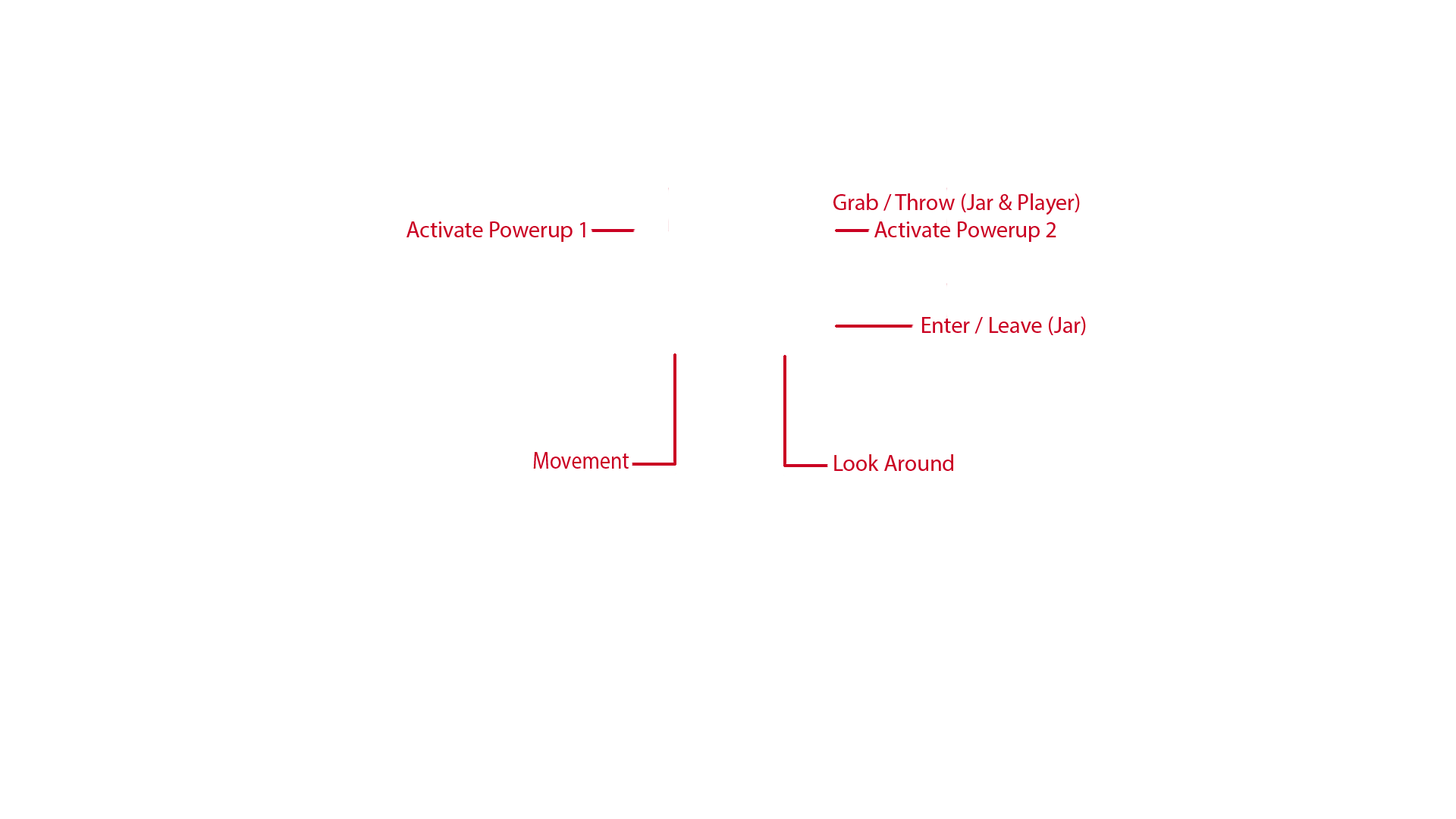
<style>
.page{position:relative;width:1456px;height:819px;background:#ffffff}
.page>*{position:absolute;margin:0}
.t1{font:22.7px "MyriadPro-Regular";color:#ca0022}
.t2{font:23.9px "MyriadPro-Regular";color:#ca0022;scale:0.89 1}
</style>
<div class="page">
<p class="t1" style="left:833px;top:193px;width:247px;height:22px">Grab / Throw (Jar &amp; Player)</p>
<p class="t1" style="left:406px;top:221px;width:179px;height:21px">Activate Powerup 1</p>
<p class="t1" style="left:874px;top:221px;width:182px;height:21px">Activate Powerup 2</p>
<p class="t1" style="left:922px;top:316px;width:164px;height:19px">Enter / Leave (Jar)</p>
<p class="t2" style="left:533px;top:452px;width:96px;height:17px">Movement</p>
<p class="t1" style="left:834px;top:454px;width:119px;height:17px">Look Around</p>
</div>
